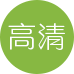
<style>
.page{position:relative;width:74px;height:74px;background:#87b842}
.page>*{position:absolute;margin:0}
.t1{font:30px "MGentleHKS-Light";color:#ffffff}
</style>
<div class="page">
<p class="t1" style="left:8px;top:22px;width:57px;height:28px">高清</p>
</div>
